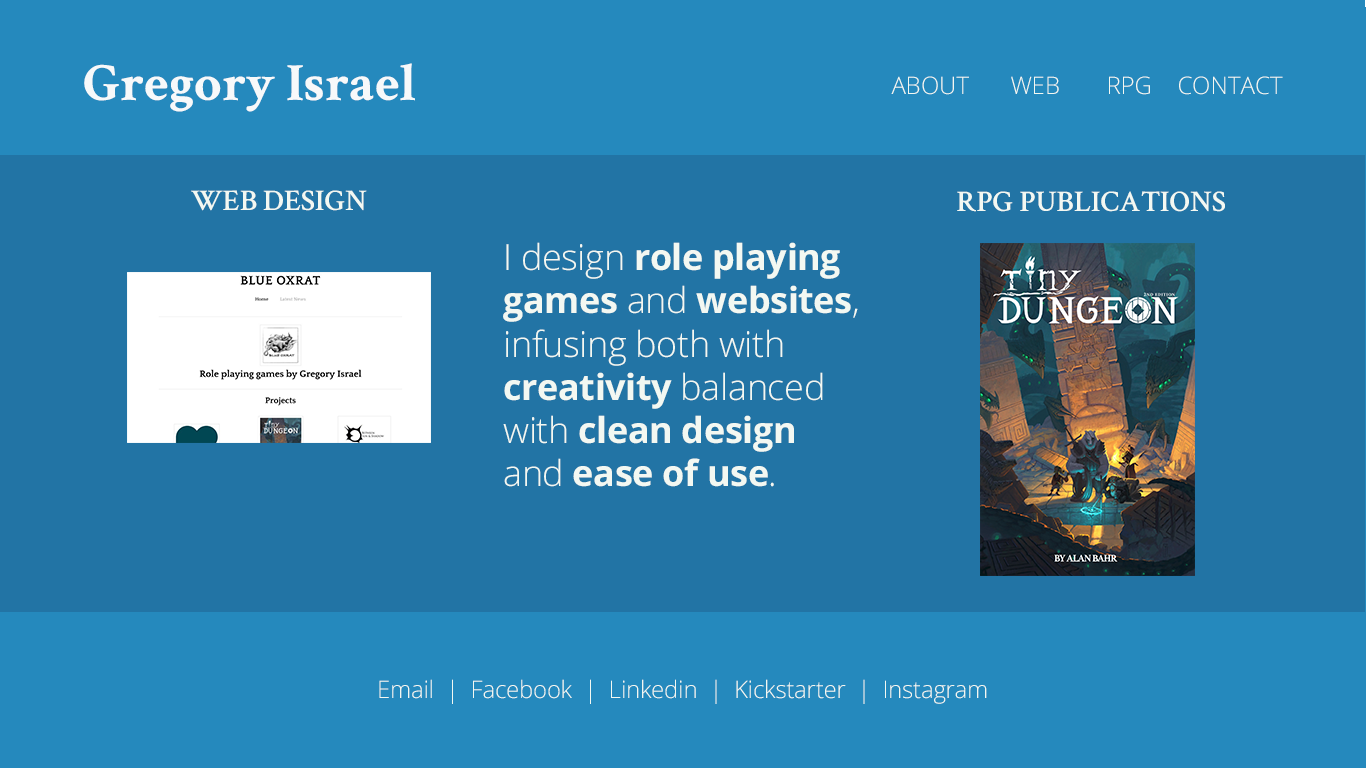
<style>
.page{position:relative;width:1366px;height:768px;background:#2274a5}
.page>*{position:absolute;margin:0}
.t1{font:54px "CrimsonText-Bold";color:#f7f9fa}
.t2{font:24px "OpenSans-Light";color:#f3f8f2}
.t3{font:30px "CrimsonText-SemiBold";color:#f3f8f2}
.t4{font:36px "OpenSans-Light";letter-spacing:-0.01em;color:#f3f8f2}
.t5{font:36px "OpenSans-Light";letter-spacing:-0.01em;color:#f3f8f2;text-transform:uppercase}
.t6{font:36px "OpenSans-Bold";letter-spacing:-0.01em;color:#f3f8f2}
.t7{font:24px "OpenSans-Light";letter-spacing:-0.01em;color:#f3f8f2}
</style>
<div class="page">
<p class="t1" style="left:84px;top:63px;width:331px;height:49px">Gregory Israel</p>
<p class="t2" style="left:891px;top:76px;width:78px;height:19px">ABOUT</p>
<p class="t2" style="left:1011px;top:76px;width:48px;height:18px">WEB</p>
<p class="t2" style="left:1109px;top:76px;width:41px;height:19px">RPG</p>
<p class="t2" style="left:1179px;top:76px;width:104px;height:19px">CONTACT</p>
<p class="t3" style="left:191px;top:190px;width:176px;height:21px">WEB DESIGN</p>
<p class="t3" style="left:957px;top:191px;width:268px;height:21px">RPG PUBLICATIONS</p>
<p class="t4" style="left:503px;top:242px;width:355px;height:245px"><span class="t5">I </span>design <span class="t6">role playing games</span> and <span class="t6">websites</span>, infusing both with <span class="t6">creativity</span> balanced with <span class="t6">clean design</span> and <span class="t6">ease of use</span>.</p>
<p class="t7" style="left:379px;top:679px;width:608px;height:25px">Email  |  Facebook  |  Linkedin  |  Kickstarter  |  Instagram</p>
</div>
